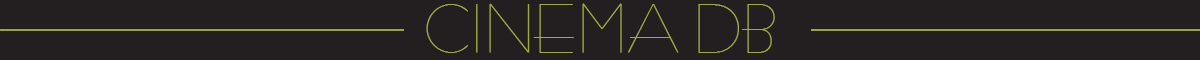
<style>
.page{position:relative;width:1200px;height:60px;background:#231f21}
.page>*{position:absolute;margin:0}
.t1{font:54.2px "BernhardFashion-BT";color:#9fad3e}
</style>
<div class="page">
<p class="t1" style="left:426px;top:3px;width:349px;height:50px">CINEMA DB</p>
</div>
